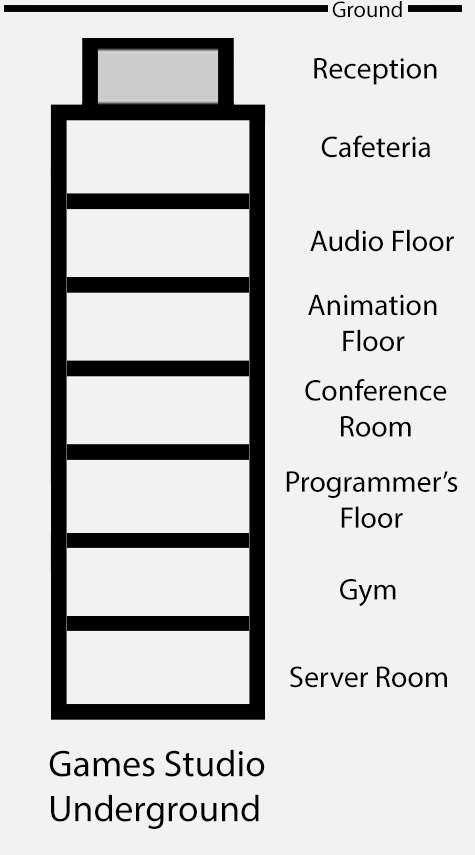
<style>
.page{position:relative;width:475px;height:855px;background:#f2f2f2}
.page>*{position:absolute;margin:0}
.t1{font:22.5px "MyriadPro-Regular";color:#000000}
.t2{font:30px "MyriadPro-Regular";color:#000000}
.t3{font:37.5px "MyriadPro-Regular";color:#010101}
</style>
<div class="page">
<p class="t1" style="left:332px;top:1px;width:70px;height:17px">Ground</p>
<p class="t2" style="left:314px;top:58px;width:123px;height:27px">Reception</p>
<p class="t2" style="left:321px;top:135px;width:109px;height:23px">Cafeteria</p>
<p class="t2" style="left:310px;top:229px;width:144px;height:23px">Audio Floor</p>
<p class="t2" style="left:308px;top:294px;width:129px;height:58px;text-align:center">Animation<br>Floor</p>
<p class="t2" style="left:305px;top:379px;width:142px;height:58px;text-align:center">Conference<br>Room</p>
<p class="t2" style="left:286px;top:471px;width:172px;height:57px;text-align:center">Programmer’s<br>Floor</p>
<p class="t2" style="left:340px;top:579px;width:56px;height:28px">Gym</p>
<p class="t2" style="left:290px;top:666px;width:157px;height:22px">Server Room</p>
<p class="t3" style="left:49px;top:749px;width:216px;height:80px">Games Studio<br>Underground</p>
</div>
